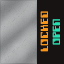
<style>
.page{position:relative;width:64px;height:64px;background:#181313}
.page>*{position:absolute;margin:0}
.t1{font:12px "Computerfont";color:#f5961b;text-transform:uppercase;font-weight:bold}
.t2{font:12px "Computerfont";color:#27e0b2;text-transform:uppercase;font-weight:bold}
</style>
<div class="page">
<p class="t1" style="left:40px;top:11px;width:8px;height:41px;rotate:-90deg">locked</p>
<p class="t2" style="left:52px;top:19px;width:8px;height:26px;rotate:-90deg">open</p>
</div>
